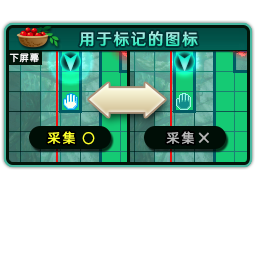
<style>
.page{position:relative;width:256px;height:256px;background:#ffffff}
.page>*{position:absolute;margin:0}
.t1{font:16px "HYWenHei-FEW";letter-spacing:0.105em;scale:0.97 1}
.t2{font:9.3px "FZY3--GB1-4";letter-spacing:0.105em;color:#ffffff;scale:0.97 1}
.t3{font:13.3px "HYWenHei-FEW";letter-spacing:0.165em;color:#fdff2c;scale:0.97 1}
.t4{font:13.3px "HYWenHei-FEW";letter-spacing:0.165em;color:#b6b6b6;scale:0.97 1}
</style>
<div class="page">
<p class="t1" style="left:79px;top:31px;width:119px;height:16px">用于标记的图标</p>
<p class="t2" style="left:9px;top:53px;width:30px;height:10px">下屏幕</p>
<p class="t3" style="left:47px;top:131px;width:28px;height:13px">采集</p>
<p class="t4" style="left:166px;top:131px;width:28px;height:13px">采集</p>
</div>
